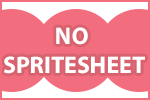
<style>
.page{position:relative;width:150px;height:100px;background:#f26d7d}
.page>*{position:absolute;margin:0}
.t1{font:24px "MyriadPro-Bold";color:#ffffff}
</style>
<div class="page">
<p class="t1" style="left:4px;top:27px;width:141px;height:47px;text-align:center">NO <br>SPRITESHEET</p>
</div>
